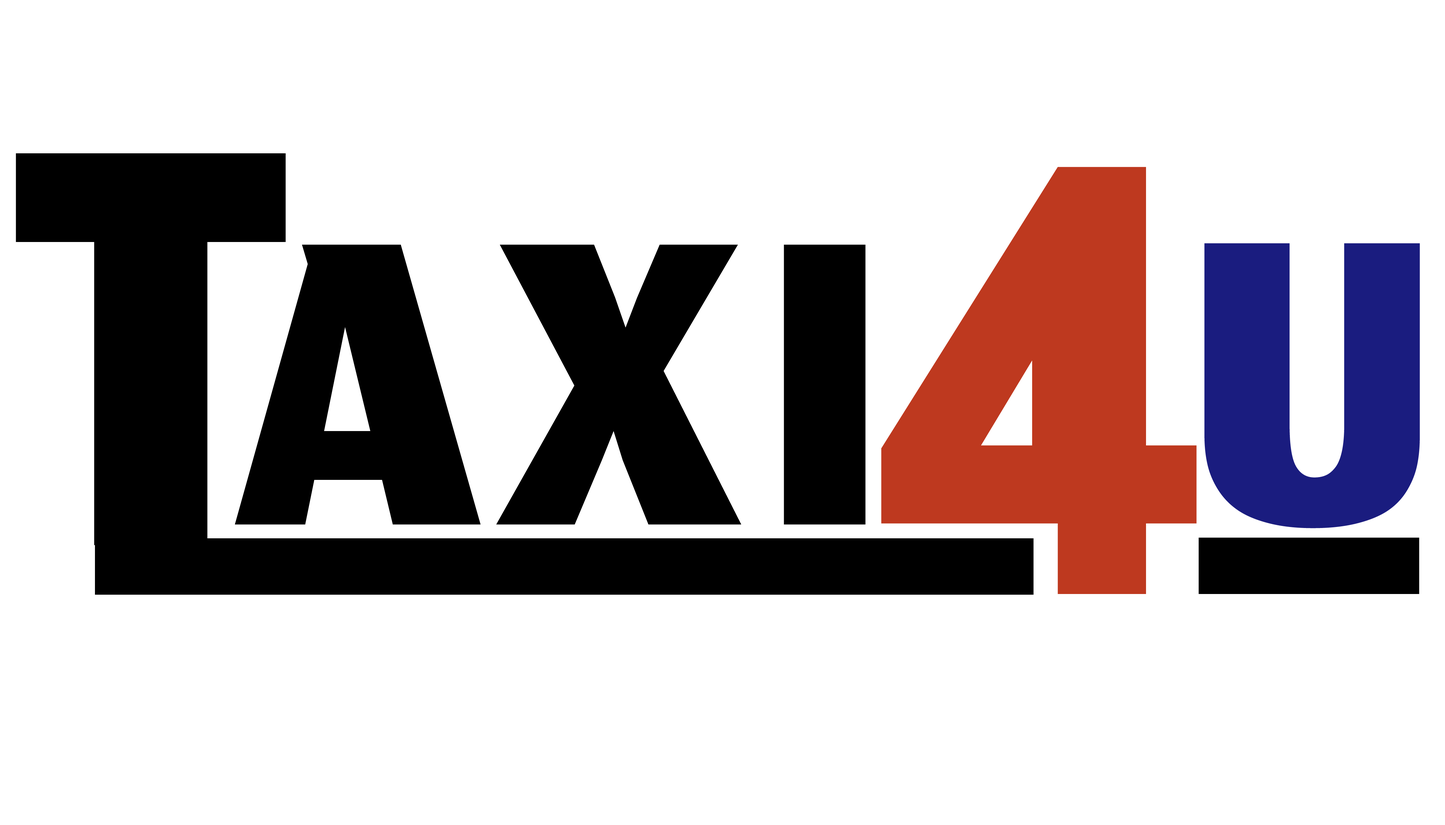
<style>
.page{position:relative;width:1445px;height:825px;background:#ffffff}
.page>*{position:absolute;margin:0}
.t1{font:1003.2px "Jomhuria-Regular";letter-spacing:-0.04em;color:#000000}
.t2{font:716.5px "Jomhuria-Regular";letter-spacing:-0.04em;color:#000000}
.t3{font:716.5px "Jomhuria-Regular";letter-spacing:-0.04em;color:#1a1c7f}
</style>
<div class="page">
<p class="t1" style="left:16px;top:153px;width:270px;height:392px">T</p>
<p class="t2" style="left:235px;top:245px;width:630px;height:280px">A X I</p>
<p class="t3" style="left:1204px;top:243px;width:215px;height:286px">U</p>
</div>
